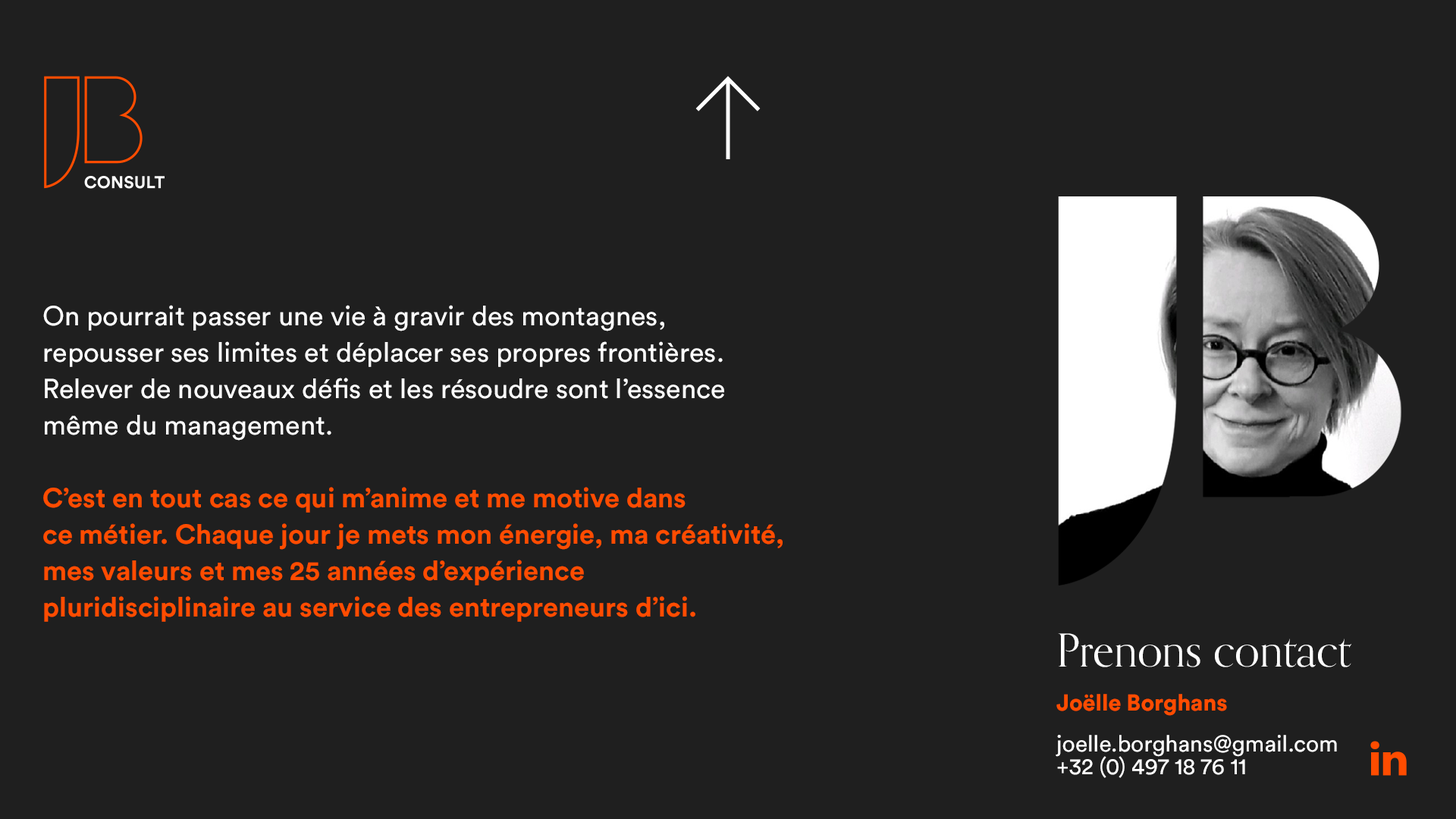
<style>
.page{position:relative;width:1456px;height:819px;background:#1f1f1f}
.page>*{position:absolute;margin:0}
.t1{font:27.3px/36.4px "CircularPro-Bold";color:#ff4c00}
.t2{font:27.3px/36.4px "CircularPro-Book";color:#ffffff}
.t3{font:45.5px "OrpheusPro";color:#ffffff}
.t4{font:22.7px/22.7px "CircularPro-Book";color:#ffffff}
.t5{font:22.7px/54.6px "CircularPro-Black";color:#ff4c00}
</style>
<div class="page">
<p class="t1" style="left:43px;top:305px;width:740px;height:317px"><span class="t2">On pourrait passer une vie à gravir des montagnes, <br>repousser ses limites et déplacer ses propres frontières. <br>Relever de nouveaux défis et les résoudre sont l’essence même du management. <br><br></span>C’est en tout cas ce qui m’anime et me motive dans <br>ce métier. Chaque jour je mets mon énergie, ma créativité, mes valeurs et mes 25 années d’expérience pluridisciplinaire au service des entrepreneurs d’ici.</p>
<p class="t3" style="left:1058px;top:633px;width:293px;height:34px">Prenons contact</p>
<p class="t4" style="left:1056px;top:694px;width:281px;height:100px"><span class="t5">Joëlle Borghans<br></span>joelle.borghans@gmail.com<br>+32 (0) 497 18 76 11</p>
</div>
